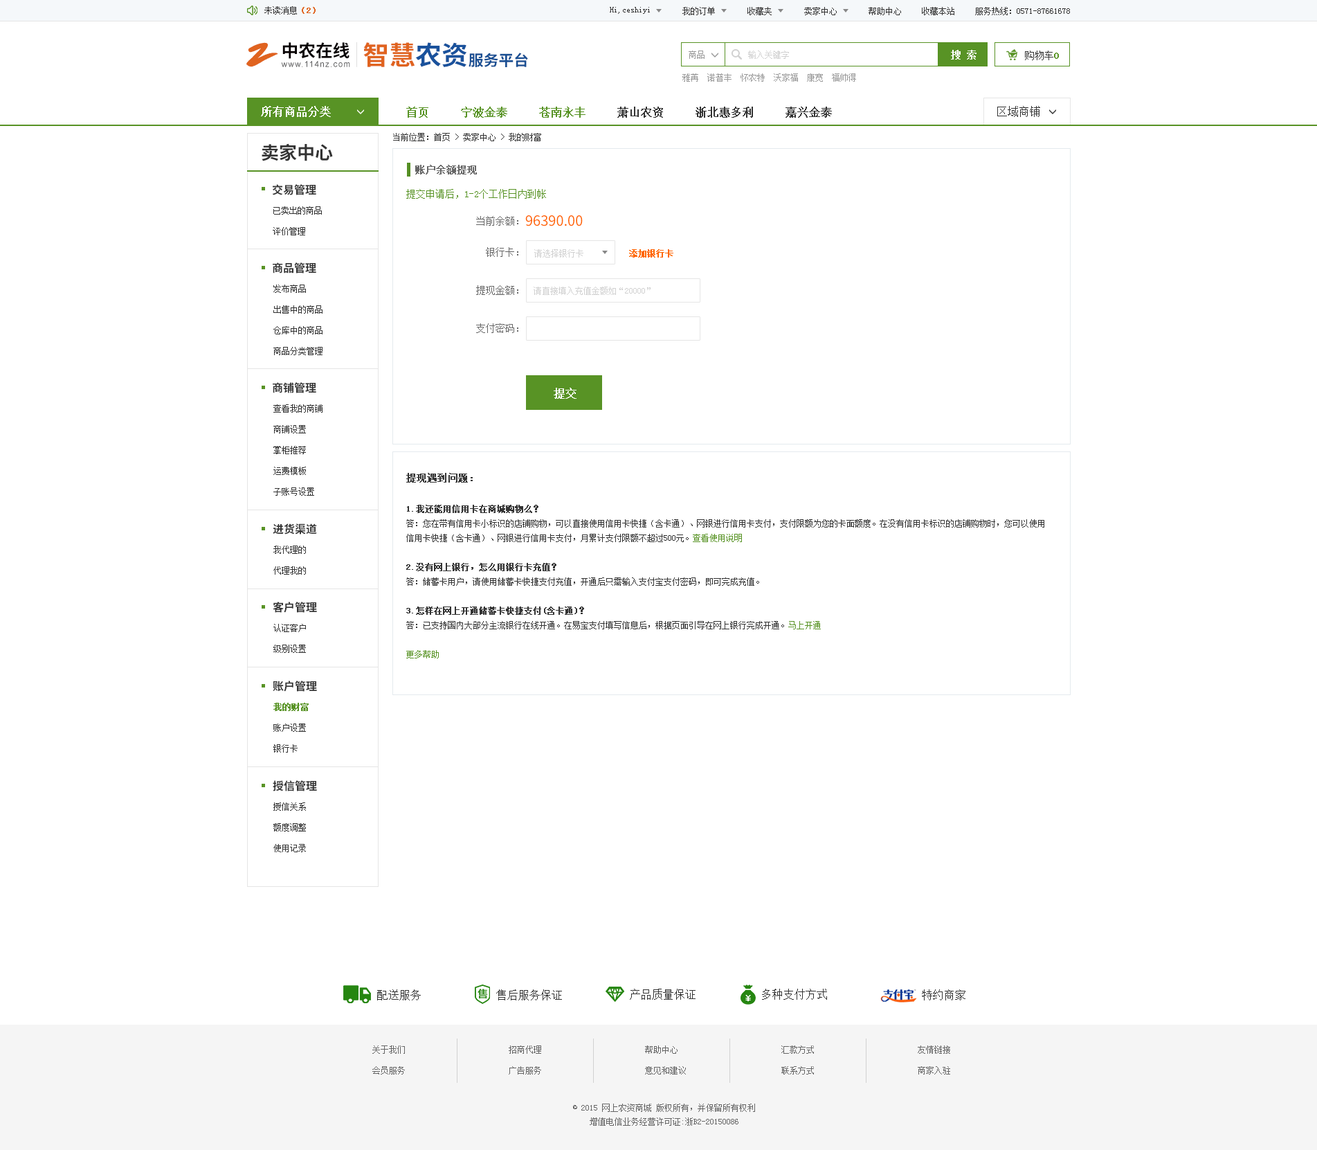
<style>
.page{position:relative;width:1317px;height:1150px;background:#ffffff}
.page>*{position:absolute;margin:0}
.t1{font:8.3px "SimSun";color:#333333}
.t2{font:8.3px "SimSun";color:#e0631f;font-weight:bold}
.t3{font:35.1px "SmudgerLetPlain";color:#e0631f}
.t4{font:17.1px "SourceHanSansCN-Bold";color:#060001}
.t5{font:26.2px "SourceHanSansCN-Bold";color:#e0631f}
.t6{font:26.2px "SourceHanSansCN-Bold";color:#1a529c}
.t7{font:15px "SourceHanSansCN-Bold";color:#194f93}
.t8{font:8.3px "SimSun";color:#999999}
.t9{font:8.3px "SimSun";color:#d1d1d1}
.t10{font:9.7px "SimSun";color:#ffffff;font-weight:bold}
.t11{font:9.7px "SimSun";color:#333333}
.t12{font:9.7px "SimSun";color:#589325;font-weight:bold}
.t13{font:8.2px "ArialMT";letter-spacing:0.1em;color:#585859}
.t14{font:11.1px "SimSun";color:#ffffff;font-weight:bold}
.t15{font:11.1px "SimSun";color:#333333;font-weight:bold}
.t16{font:11.1px "SimSun";color:#589325;font-weight:bold}
.t17{font:11.1px "SimSun";color:#333333}
.t18{font:18px "SourceHanSansCN-Bold";color:#333333}
.t19{font:9.7px "SimSun";color:#666666;font-weight:bold}
.t20{font:11.1px "SourceHanSansCN-Bold";color:#333333}
.t21{font:9.7px "SimSun";color:#589325}
.t22{font:8.3px/20.8px "SimSun";color:#333333}
.t23{font:9.7px "SimSun";color:#666666}
.t24{font:13.8px "SourceHanSansCN-Regular";color:#ff6600}
.t25{font:8.3px "SimSun";color:#ff6600;font-weight:bold}
.t26{font:9.7px "SimSun";color:#333333;font-weight:bold}
.t27{font:8.3px "SimSun";color:#333333;font-weight:bold}
.t28{font:8.3px "SimSun";color:#589325}
.t29{font:8.3px/20.8px "SimSun";color:#589325;font-weight:bold}
.t30{font:8.3px/20.8px "SimSun";color:#666666}
.t31{font:8.3px/13.8px "SimSun";color:#666666}
</style>
<div class="page">
<p class="t1" style="left:264px;top:6px;width:52px;height:9px">未读消息<span class="t2">（2）</span></p>
<p class="t1" style="left:610px;top:7px;width:40px;height:7px">Hi,ceshiyi</p>
<p class="t1" style="left:683px;top:7px;width:32px;height:8px">我的订单</p>
<p class="t1" style="left:748px;top:7px;width:24px;height:8px">收藏夹</p>
<p class="t1" style="left:804px;top:7px;width:33px;height:8px">卖家中心</p>
<p class="t1" style="left:869px;top:7px;width:32px;height:8px">帮助中心</p>
<p class="t1" style="left:922px;top:7px;width:33px;height:8px">收藏本站</p>
<p class="t1" style="left:975px;top:7px;width:95px;height:8px">服务热线：0571-87661678</p>
<p class="t3" style="left:246px;top:42px;width:32px;height:25px">Z</p>
<p class="t4" style="left:282px;top:42px;width:68px;height:17px">中农在线</p>
<p class="t5" style="left:363px;top:42px;width:104px;height:25px">智慧<span class="t6">农资</span></p>
<p class="t7" style="left:469px;top:53px;width:59px;height:14px">服务平台</p>
<p class="t8" style="left:689px;top:51px;width:16px;height:8px">商品</p>
<p class="t9" style="left:748px;top:51px;width:41px;height:8px">输入关键字</p>
<p class="t10" style="left:951px;top:50px;width:26px;height:10px">搜 索</p>
<p class="t11" style="left:1025px;top:51px;width:34px;height:9px">购物车<span class="t12">0</span></p>
<p class="t13" style="left:281px;top:61px;width:69px;height:6px">www.114nz.com</p>
<p class="t8" style="left:683px;top:73px;width:173px;height:9px">雅苒  诺普丰  怀农特  沃家福  康宽  福帅得</p>
<p class="t14" style="left:261px;top:106px;width:70px;height:11px">所有商品分类</p>
<p class="t15" style="left:406px;top:107px;width:426px;height:11px"><span class="t16">首页     宁波金泰     苍南永丰    </span> 萧山农资     浙北惠多利     嘉兴金泰</p>
<p class="t17" style="left:998px;top:106px;width:43px;height:11px">区域商铺</p>
<p class="t1" style="left:393px;top:133px;width:148px;height:8px">当前位置：首页 &gt; 卖家中心 &gt; 我的财富</p>
<p class="t18" style="left:262px;top:143px;width:71px;height:18px">卖家中心</p>
<p class="t19" style="left:415px;top:165px;width:62px;height:9px">账户余额提现</p>
<p class="t20" style="left:272px;top:184px;width:44px;height:11px">交易管理</p>
<p class="t21" style="left:406px;top:189px;width:140px;height:10px">提交申请后，1-2个工作日内到帐</p>
<p class="t22" style="left:273px;top:206px;width:49px;height:29px">已卖出的商品<br>评价管理</p>
<p class="t23" style="left:476px;top:216px;width:43px;height:10px">当前余额：</p>
<p class="t24" style="left:525px;top:215px;width:58px;height:11px">96390.00</p>
<p class="t23" style="left:486px;top:247px;width:33px;height:10px">银行卡：</p>
<p class="t9" style="left:534px;top:249px;width:50px;height:9px">请选择银行卡</p>
<p class="t25" style="left:629px;top:249px;width:45px;height:9px">添加银行卡</p>
<p class="t20" style="left:273px;top:262px;width:43px;height:11px">商品管理</p>
<p class="t22" style="left:273px;top:285px;width:50px;height:70px">发布商品<br>出售中的商品<br>仓库中的商品<br>商品分类管理</p>
<p class="t23" style="left:476px;top:285px;width:43px;height:10px">提现金额：</p>
<p class="t9" style="left:534px;top:287px;width:117px;height:8px">请直接填入充值金额如“20000”</p>
<p class="t23" style="left:476px;top:323px;width:43px;height:10px">支付密码：</p>
<p class="t20" style="left:273px;top:382px;width:43px;height:11px">商铺管理</p>
<p class="t14" style="left:554px;top:388px;width:23px;height:11px">提交</p>
<p class="t22" style="left:273px;top:404px;width:50px;height:92px">查看我的商铺<br>商铺设置<br>掌柜推荐<br>运费模板<br>子账号设置</p>
<p class="t1" style="left:406px;top:473px;width:639px;height:185px"><span class="t26">提现遇到问题：<br><br></span><span class="t27">1.我还能用信用卡在商城购物么？<br></span>答：您在带有信用卡小标识的店铺购物，可以直接使用信用卡快捷（含卡通）、网银进行信用卡支付，支付限额为您的卡面额度。在没有信用卡标识的店铺购物时，您可以使用<br>信用卡快捷（含卡通）、网银进行信用卡支付，月累计支付限额不超过500元。<span class="t28">查看使用说明<br><br></span><span class="t27">2.没有网上银行，怎么用银行卡充值？<br></span>答：储蓄卡用户，请使用储蓄卡快捷支付充值，开通后只需输入支付宝支付密码，即可完成充值。<br><br><span class="t27">3.怎样在网上开通储蓄卡快捷支付(含卡通)？<br></span>答：已支持国内大部分主流银行在线开通。在易宝支付填写信息后，根据页面引导在网上银行完成开通。<span class="t28">马上开通<br><br>更多帮助</span></p>
<p class="t20" style="left:273px;top:523px;width:44px;height:11px">进货渠道</p>
<p class="t22" style="left:273px;top:546px;width:33px;height:29px">我代理的<br>代理我的</p>
<p class="t20" style="left:273px;top:602px;width:44px;height:11px">客户管理</p>
<p class="t22" style="left:273px;top:624px;width:33px;height:29px">认证客户<br>级别设置</p>
<p class="t20" style="left:273px;top:681px;width:44px;height:11px">账户管理</p>
<p class="t22" style="left:273px;top:703px;width:36px;height:50px"><span class="t29">我的财富<br></span>账户设置<br>银行卡</p>
<p class="t20" style="left:273px;top:780px;width:44px;height:11px">授信管理</p>
<p class="t22" style="left:273px;top:802px;width:33px;height:50px">授信关系<br>额度调整<br>使用记录</p>
<p class="t17" style="left:377px;top:989px;width:44px;height:11px">配送服务</p>
<p class="t17" style="left:496px;top:989px;width:66px;height:11px">售后服务保证</p>
<p class="t17" style="left:630px;top:989px;width:66px;height:11px">产品质量保证</p>
<p class="t17" style="left:762px;top:989px;width:65px;height:11px">多种支付方式</p>
<p class="t17" style="left:922px;top:989px;width:44px;height:11px">特约商家</p>
<p class="t30" style="left:372px;top:1045px;width:33px;height:29px">关于我们<br>会员服务</p>
<p class="t30" style="left:509px;top:1045px;width:32px;height:29px">招商代理<br>广告服务</p>
<p class="t30" style="left:645px;top:1045px;width:41px;height:29px">帮助中心<br>意见和建议</p>
<p class="t30" style="left:782px;top:1045px;width:32px;height:29px">汇款方式<br>联系方式</p>
<p class="t30" style="left:918px;top:1045px;width:33px;height:29px">友情链接<br>商家入驻</p>
<p class="t31" style="left:573px;top:1104px;width:182px;height:22px;text-align:center">© 2015 网上农资商城 版权所有，并保留所有权利<br>增值电信业务经营许可证:浙B2-20150086</p>
</div>
